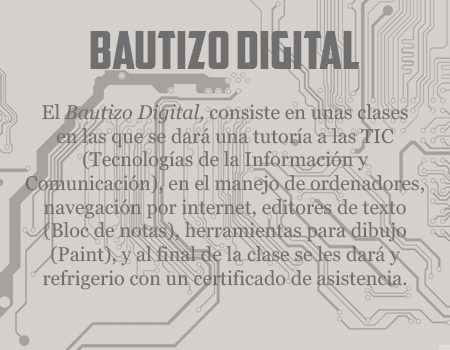
<style>
.page{position:relative;width:450px;height:350px;background:#d5d0cc}
.page>*{position:absolute;margin:0}
.t1{font:52.8px "AmericanCaptain";color:#6f6f6f}
.t2{font:19.8px "Georgia";color:#6f6f6f}
.t3{font:19.8px "Georgia-Italic";color:#6f6f6f}
</style>
<div class="page">
<p class="t1" style="left:90px;top:31px;width:270px;height:38px">BAUTIZO DIGITAL</p>
<p class="t2" style="left:25px;top:103px;width:399px;height:187px;text-align:center">El <span class="t3">Bautizo Digital, </span>consiste en unas clases<br>en las que se dará una tutoría a las TIC<br>(Tecnologías de la Información y<br>Comunicación), en el manejo de ordenadores,<br>navegación por internet, editores de texto<br>(Bloc de notas), herramientas para dibujo<br>(Paint), y al final de la clase se les dará y<br>refrigerio con un certificado de asistencia.</p>
</div>
